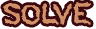
<style>
.page{position:relative;width:96px;height:29px;background:#3b080d}
.page>*{position:absolute;margin:0}
.t1{font:28px "TOBACCO";color:#c4845a;font-weight:bold}
</style>
<div class="page">
<p class="t1" style="left:3px;top:2px;width:88px;height:23px">SOLVE</p>
</div>
